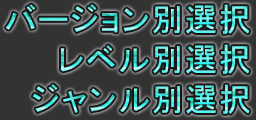
<style>
.page{position:relative;width:256px;height:120px;background:#333333}
.page>*{position:absolute;margin:0}
.t1{font:32px "MS-PGothic";letter-spacing:0.05em}
</style>
<div class="page">
<p class="t1" style="left:6px;top:4px;width:244px;height:30px">バージョン別選択</p>
<p class="t1" style="left:60px;top:44px;width:190px;height:30px">レベル別選択</p>
<p class="t1" style="left:32px;top:84px;width:218px;height:30px">ジャンル別選択</p>
</div>
